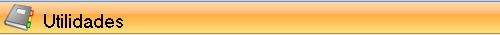
<style>
.page{position:relative;width:500px;height:35px}
.page>*{position:absolute;margin:0}
.t1{font:18px "MS Sans Serif";color:#000000}
</style>
<div class="page">
<p class="t1" style="left:44px;top:14px;width:79px;height:14px">Utilidades</p>
</div>
